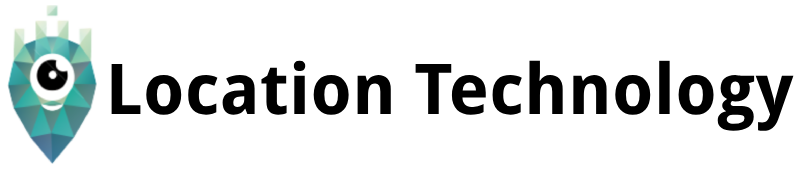
<style>
.page{position:relative;width:800px;height:170px;background:#ffffff}
.page>*{position:absolute;margin:0}
.t1{font:70px "DroidSans-Bold";color:#000000}
</style>
<div class="page">
<p class="t1" style="left:111px;top:60px;width:683px;height:71px">Location Technology</p>
</div>
